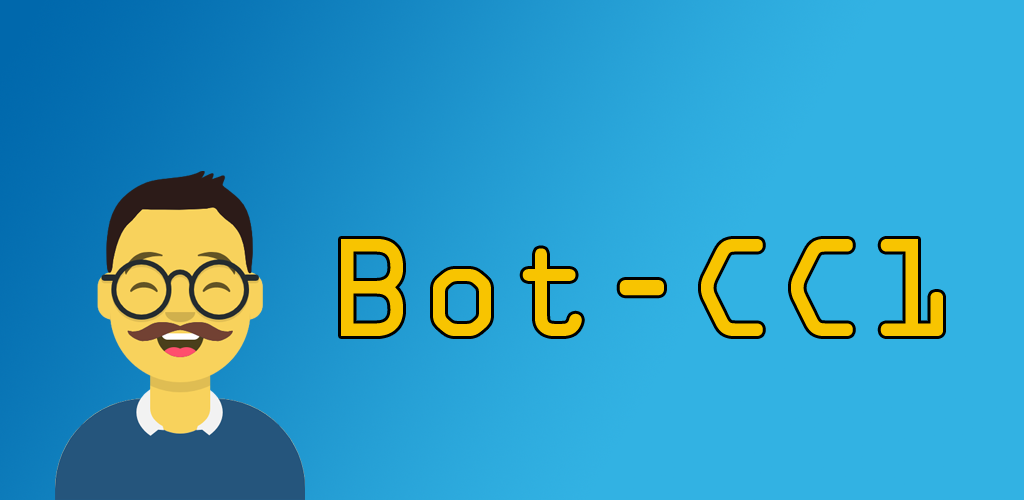
<style>
.page{position:relative;width:1024px;height:500px;background:#32b2e3}
.page>*{position:absolute;margin:0}
.t1{font:125px "OCRAStd";color:#f8c400}
</style>
<div class="page">
<p class="t1" style="left:341px;top:239px;width:602px;height:97px">Bot-CC1</p>
</div>
